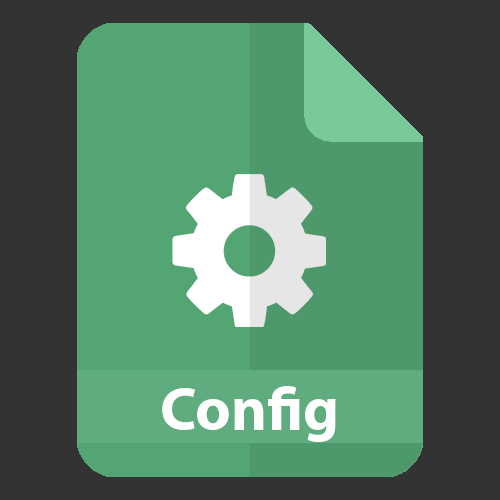
<style>
.page{position:relative;width:500px;height:500px;background:#333333}
.page>*{position:absolute;margin:0}
.t1{font:61.6px "MyriadPro-Bold";color:#ffffff}
</style>
<div class="page">
<p class="t1" style="left:162px;top:386px;width:174px;height:56px">Config</p>
</div>
